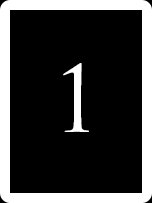
<style>
.page{position:relative;width:152px;height:203px;background:#000000}
.page>*{position:absolute;margin:0}
.t1{font:90px "TrajanPro3-Regular";color:#ffffff}
</style>
<div class="page">
<p class="t1" style="left:63px;top:63px;width:26px;height:69px">1</p>
</div>
